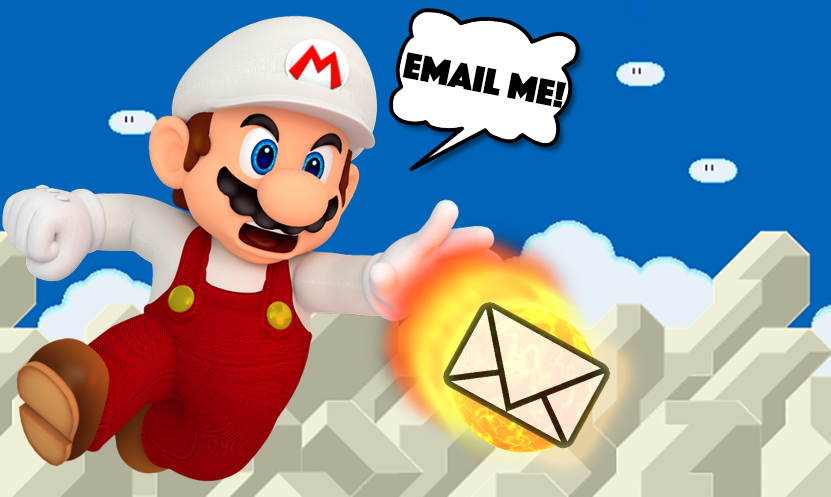
<style>
.page{position:relative;width:831px;height:497px;background:#0064b8}
.page>*{position:absolute;margin:0}
.t1{font:38px "Phosphate-Solid";color:#000000}
</style>
<div class="page">
<p class="t1" style="left:402px;top:52px;width:165px;height:56px;rotate:11deg">Email me!</p>
</div>
